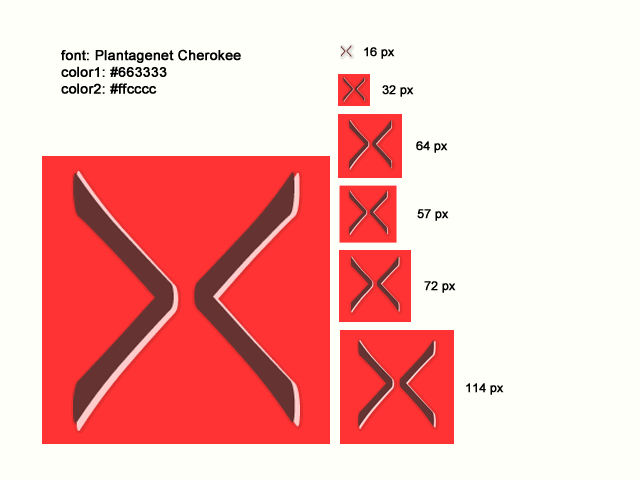
<style>
.page{position:relative;width:640px;height:480px;background:#fffffa}
.page>*{position:absolute;margin:0}
.t1{font:14px "ArialMT";color:#000000;font-weight:bold}
.t2{font:12px "ArialMT";color:#000000;font-weight:bold}
</style>
<div class="page">
<p class="t1" style="left:61px;top:49px;width:180px;height:45px">font: Plantagenet Cherokee<br>color1: #663333<br>color2: #ffcccc</p>
<p class="t2" style="left:364px;top:47px;width:31px;height:12px">16 px</p>
<p class="t2" style="left:382px;top:85px;width:32px;height:12px">32 px</p>
<p class="t2" style="left:416px;top:141px;width:32px;height:12px">64 px</p>
<p class="t2" style="left:417px;top:209px;width:32px;height:12px">57 px</p>
<p class="t2" style="left:424px;top:281px;width:32px;height:12px">72 px</p>
<p class="t2" style="left:466px;top:383px;width:38px;height:12px">114 px</p>
</div>
